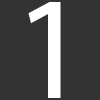
<style>
.page{position:relative;width:100px;height:100px;background:#333333}
.page>*{position:absolute;margin:0}
.t1{font:148px "MyriadPro-Regular";color:#ffffff}
</style>
<div class="page">
<p class="t1" style="left:28px;top:2px;width:33px;height:96px">1</p>
</div>
